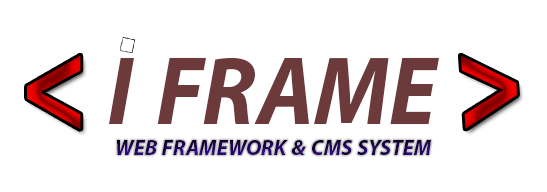
<style>
.page{position:relative;width:547px;height:192px;background:#ffffff}
.page>*{position:absolute;margin:0}
.t1{font:192.7px "MyriadArabic-BoldIt";scale:0.81 1}
.t2{font:138px "MyriadArabic-BoldIt";color:#6c3a3a;scale:0.93 1}
.t3{font:30px "MyriadArabic-BoldIt"}
</style>
<div class="page">
<p class="t1" style="left:27px;top:55px;width:54px;height:74px">&lt;</p>
<p class="t2" style="left:109px;top:57px;width:330px;height:68px">I FRAME</p>
<p class="t1" style="left:460px;top:55px;width:57px;height:74px;rotate:176deg">&lt;</p>
<p class="t3" style="left:117px;top:140px;width:314px;height:15px">WEB FRAMEWORK &amp; CMS SYSTEM</p>
</div>
